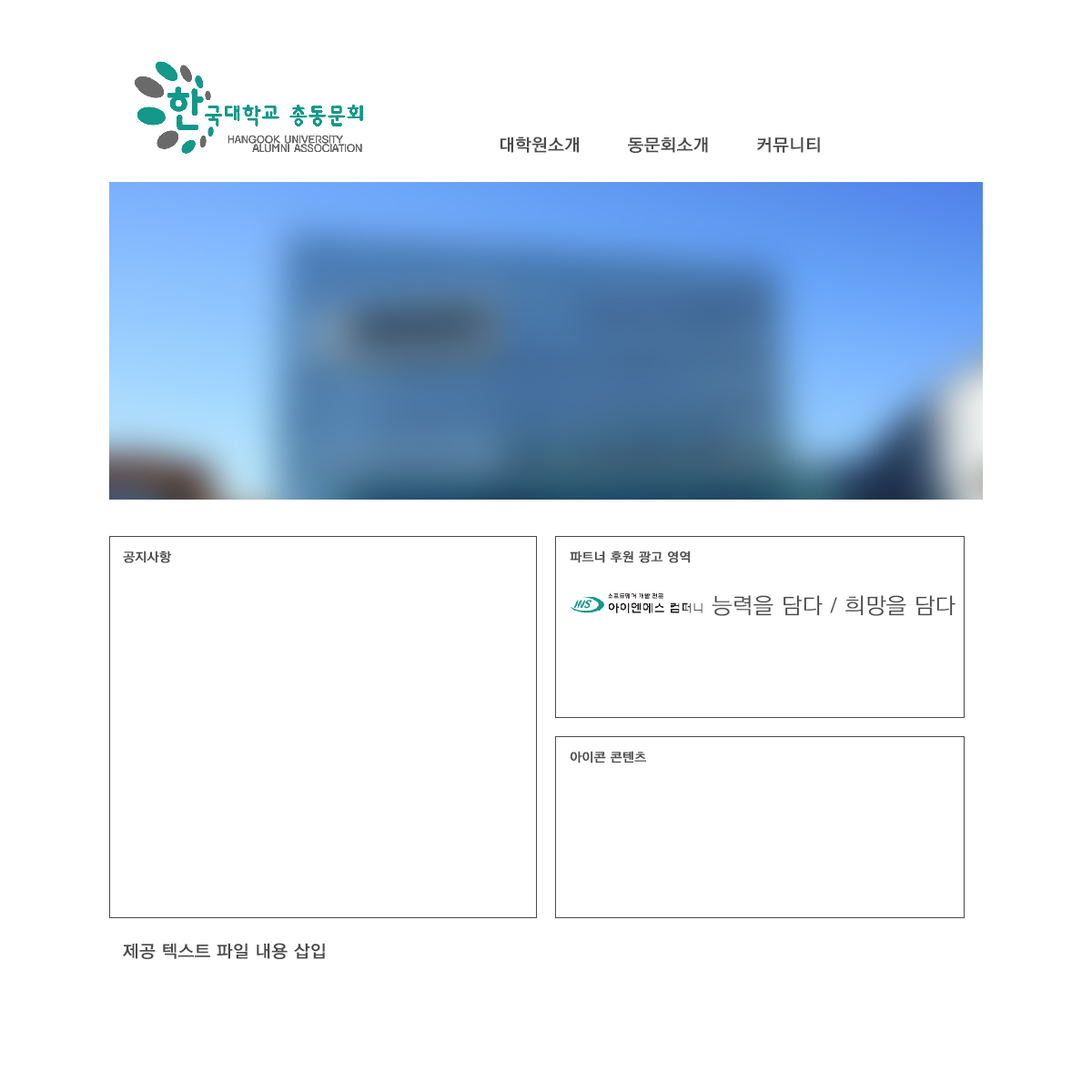
<style>
.page{position:relative;width:1092px;height:1092px;background:#ffffff}
.page>*{position:absolute;margin:0}
.t1{font:17.3px "THELuxGoM";color:#4a4a4a;font-weight:bold}
.t2{font:12.7px "THELuxGoM";color:#4a4a4a;font-weight:bold}
.t3{font:21.8px "THELuxGoL";color:#4a4a4a;font-weight:bold}
</style>
<div class="page">
<p class="t1" style="left:500px;top:136px;width:320px;height:17px">대학원소개        동문회소개        커뮤니티</p>
<p class="t2" style="left:123px;top:551px;width:49px;height:12px">공지사항</p>
<p class="t2" style="left:570px;top:551px;width:121px;height:12px">파트너 후원 광고 영역</p>
<p class="t3" style="left:712px;top:595px;width:243px;height:21px">능력을 담다 / 희망을 담다</p>
<p class="t2" style="left:570px;top:751px;width:77px;height:12px">아이콘 콘텐츠</p>
<p class="t1" style="left:123px;top:943px;width:202px;height:16px">제공 텍스트 파일 내용 삽입</p>
</div>
